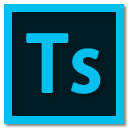
<style>
.page{position:relative;width:128px;height:128px;background:#03c0ef}
.page>*{position:absolute;margin:0}
.t1{font:75px "AdobeHeitiStd-Regular";color:#03c0ef;font-weight:bold}
</style>
<div class="page">
<p class="t1" style="left:26px;top:33px;width:75px;height:61px">Ts</p>
</div>
